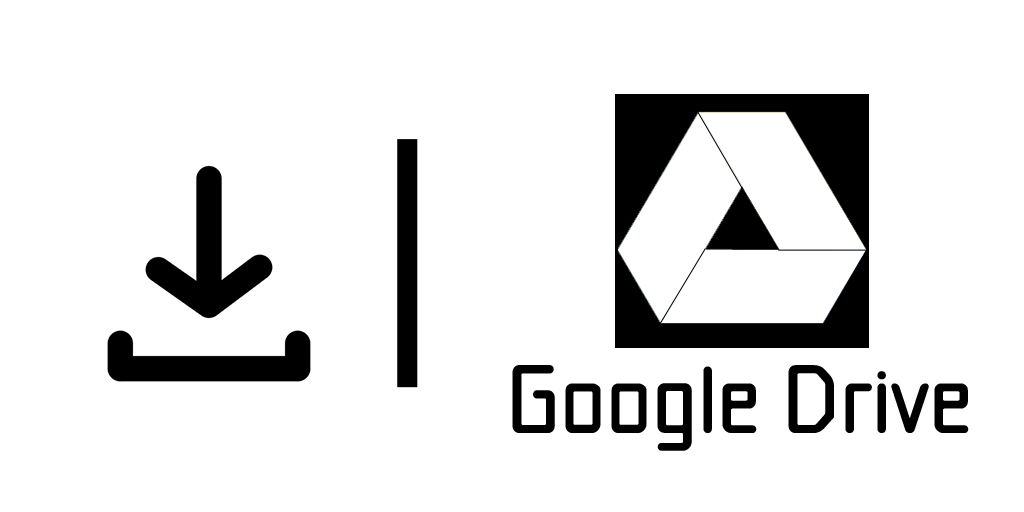
<style>
.page{position:relative;width:1024px;height:512px;background:#ffffff}
.page>*{position:absolute;margin:0}
.t1{font:250px "MS-UIGothic";color:#000000}
.t2{font:100.1px "Mamelon";color:#000000}
</style>
<div class="page">
<p class="t1" style="left:397px;top:139px;width:21px;height:249px">|</p>
<p class="t2" style="left:512px;top:365px;width:457px;height:86px">Google Drive</p>
</div>
